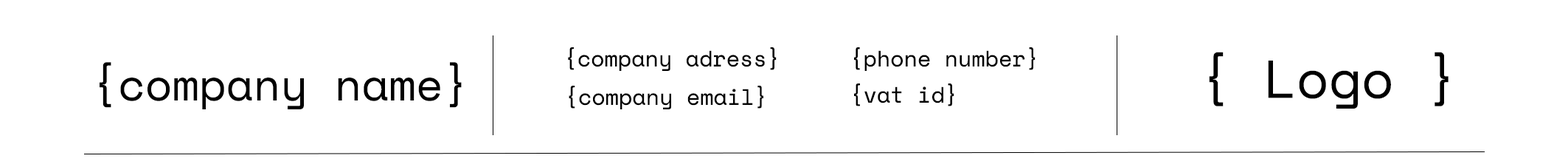
<style>
.page{position:relative;width:1568px;height:164px;background:#ffffff}
.page>*{position:absolute;margin:0}
.t1{font:22.1px "SpaceMono-Regular";color:#000000}
.t2{font:53.1px "SpaceMono-Regular";color:#000000}
.t3{font:44.3px "SpaceMono-Regular";color:#000000}
</style>
<div class="page">
<p class="t1" style="left:568px;top:47px;width:209px;height:24px">{company adress}</p>
<p class="t1" style="left:854px;top:47px;width:181px;height:24px">{phone number}</p>
<p class="t2" style="left:1209px;top:52px;width:240px;height:56px">{ Logo }</p>
<p class="t3" style="left:100px;top:62px;width:362px;height:47px">{company name}</p>
<p class="t1" style="left:569px;top:86px;width:194px;height:23px">{company email}</p>
<p class="t1" style="left:854px;top:83px;width:100px;height:23px">{vat id}</p>
</div>
